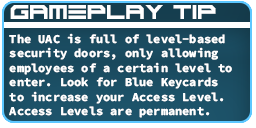
<style>
.page{position:relative;width:256px;height:128px;background:#ffffff}
.page>*{position:absolute;margin:0}
.t1{font:14px "ScifiAdventure";color:#ffffff}
.t2{font:12px "SourceCodeRoman-Bold";color:#ffffff}
</style>
<div class="page">
<p class="t1" style="left:10px;top:5px;width:206px;height:14px">GAMEPLAY TIP</p>
<p class="t2" style="left:9px;top:33px;width:223px;height:85px">The UAC is full of level-based <br>security doors, only allowing<br>employees of a certain level to<br>enter. Look for Blue Keycards<br>to increase your Access Level. <br>Access Levels are permanent.</p>
</div>
